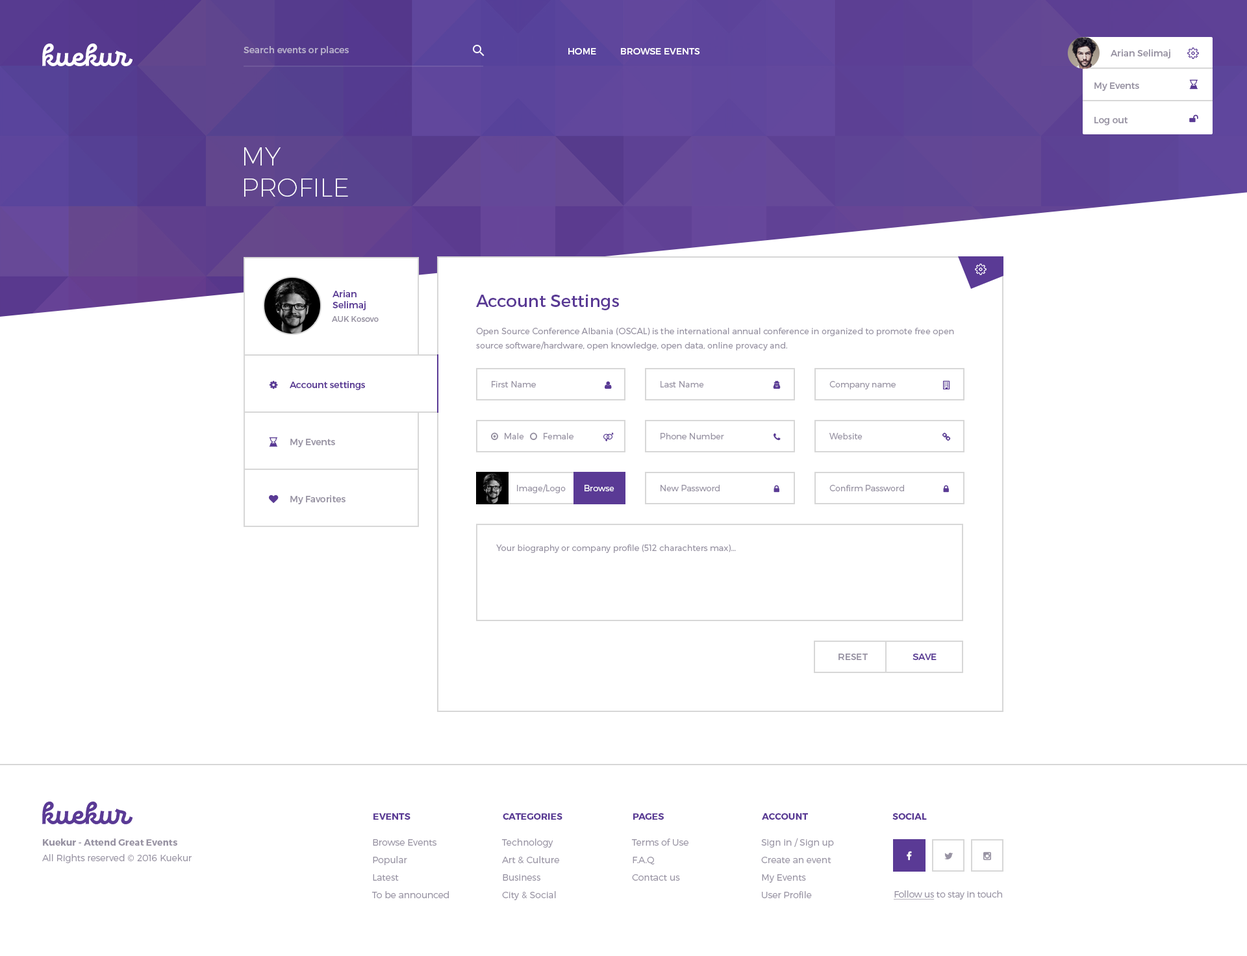
<style>
.page{position:relative;width:1247px;height:956px;background:#ffffff}
.page>*{position:absolute;margin:0}
.t1{font:9.1px "Montserrat-Regular";color:#b7afcb}
.t2{font:9.1px "Montserrat-Regular";color:#ffffff;text-transform:uppercase}
.t3{font:9.1px "Montserrat-Regular";color:#9893a3}
.t4{font:26px/31.2px "Montserrat-UltraLight";color:#ffffff;text-transform:uppercase}
.t5{font:9.1px "Montserrat-Regular";color:#5a3a95}
.t6{font:16.9px "Montserrat-Regular";color:#5a3a95}
.t7{font:7.8px "Montserrat-Regular";color:#9893a3}
.t8{font:8.4px/14.3px "Montserrat-Light";color:#9893a3}
.t9{font:8.4px "Montserrat-Light";color:#9893a3}
.t10{font:8.4px "Montserrat-Light";color:#ffffff}
.t11{font:9.1px "Montserrat-Regular";color:#9893a3;text-transform:uppercase}
.t12{font:9.1px "Montserrat-Regular";color:#5a3a95;text-transform:uppercase}
.t13{font:9.1px "Montserrat-Bold";color:#5a3a95;text-transform:uppercase}
.t14{font:9.1px/15.6px "Montserrat-Light";color:#9893a3}
.t15{font:9.1px/15.6px "Montserrat-Bold";color:#9893a3}
.t16{font:9.1px/17.5px "Montserrat-Light";color:#9893a3}
.t17{font:9.1px "Montserrat-Light";letter-spacing:-0.015em;color:#9893a3}
.t18{font:9.1px "Montserrat-Light";letter-spacing:-0.015em;color:#9893a3;text-decoration:underline}
</style>
<div class="page">
<p class="t1" style="left:243px;top:46px;width:106px;height:9px">Search events or places</p>
<p class="t2" style="left:568px;top:48px;width:132px;height:7px">Home          Browse events</p>
<p class="t3" style="left:1110px;top:49px;width:60px;height:9px">Arian Selimaj</p>
<p class="t3" style="left:1094px;top:82px;width:45px;height:9px">My Events</p>
<p class="t3" style="left:1094px;top:117px;width:34px;height:8px">Log out</p>
<p class="t4" style="left:244px;top:147px;width:104px;height:50px">my<br>profile</p>
<p class="t5" style="left:332px;top:290px;width:34px;height:20px">Arian <br>Selimaj</p>
<p class="t6" style="left:476px;top:294px;width:143px;height:16px">Account Settings</p>
<p class="t7" style="left:332px;top:316px;width:47px;height:6px">AUK Kosovo</p>
<p class="t8" style="left:476px;top:328px;width:478px;height:23px">Open Source Conference Albania (OSCAL) is the international annual conference in organized to promote free open source software/hardware, open knowledge, open data, online provacy and.</p>
<p class="t5" style="left:290px;top:381px;width:75px;height:9px">Account settings</p>
<p class="t9" style="left:492px;top:381px;width:44px;height:7px">First Name</p>
<p class="t9" style="left:660px;top:381px;width:44px;height:7px">Last Name</p>
<p class="t9" style="left:829px;top:381px;width:66px;height:9px">Company name</p>
<p class="t9" style="left:505px;top:433px;width:19px;height:7px">Male</p>
<p class="t9" style="left:543px;top:433px;width:30px;height:7px">Female</p>
<p class="t9" style="left:660px;top:433px;width:64px;height:7px">Phone Number</p>
<p class="t9" style="left:829px;top:433px;width:33px;height:7px">Website</p>
<p class="t3" style="left:290px;top:439px;width:45px;height:8px">My Events</p>
<p class="t9" style="left:517px;top:484px;width:49px;height:9px">Image/Logo</p>
<p class="t10" style="left:584px;top:485px;width:30px;height:7px">Browse</p>
<p class="t9" style="left:660px;top:485px;width:59px;height:7px">New Password</p>
<p class="t9" style="left:829px;top:485px;width:75px;height:7px">Confirm Password</p>
<p class="t3" style="left:290px;top:495px;width:55px;height:10px">My Favorites</p>
<p class="t9" style="left:496px;top:545px;width:240px;height:8px">Your biography or company profile (512 charachters max)...</p>
<p class="t11" style="left:838px;top:654px;width:30px;height:6px">reset</p>
<p class="t12" style="left:912px;top:654px;width:24px;height:6px">save</p>
<p class="t13" style="left:373px;top:814px;width:37px;height:6px">Events</p>
<p class="t13" style="left:503px;top:814px;width:59px;height:6px">categories</p>
<p class="t13" style="left:633px;top:814px;width:31px;height:6px">Pages</p>
<p class="t13" style="left:762px;top:814px;width:46px;height:6px">Account</p>
<p class="t13" style="left:892px;top:814px;width:35px;height:6px">social</p>
<p class="t14" style="left:42px;top:839px;width:150px;height:25px"><span class="t15">Kuekur - Attend Great Events<br></span>All Rights reserved © 2016 Kuekur</p>
<p class="t16" style="left:371px;top:840px;width:78px;height:59px">Browse Events<br>Popular<br>Latest<br>To be announced</p>
<p class="t16" style="left:501px;top:839px;width:58px;height:62px">Technology<br>Art &amp; Culture<br>Business<br>City &amp; Social</p>
<p class="t16" style="left:631px;top:839px;width:57px;height:42px">Terms of Use<br>F.A.Q<br>Contact us</p>
<p class="t16" style="left:761px;top:838px;width:73px;height:61px">Sign in / Sign up<br>Create an event<br>My Events<br>User Profile</p>
<p class="t17" style="left:893px;top:891px;width:109px;height:9px"><span class="t18">Follow us</span> to stay in touch</p>
</div>
